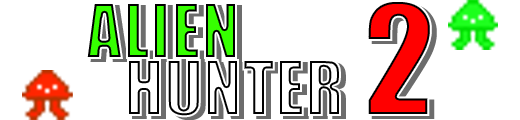
<style>
.page{position:relative;width:520px;height:120px;background:#ffffff}
.page>*{position:absolute;margin:0}
.t1{font:72px "Impact";text-transform:uppercase}
.t2{font:144px "Impact";text-transform:uppercase}
</style>
<div class="page">
<p class="t1" style="left:85px;top:2px;width:152px;height:57px">ALIEN</p>
<p class="t2" style="left:366px;top:0px;width:66px;height:116px">2</p>
<p class="t2" style="left:371px;top:3px;width:66px;height:116px">2</p>
</div>
